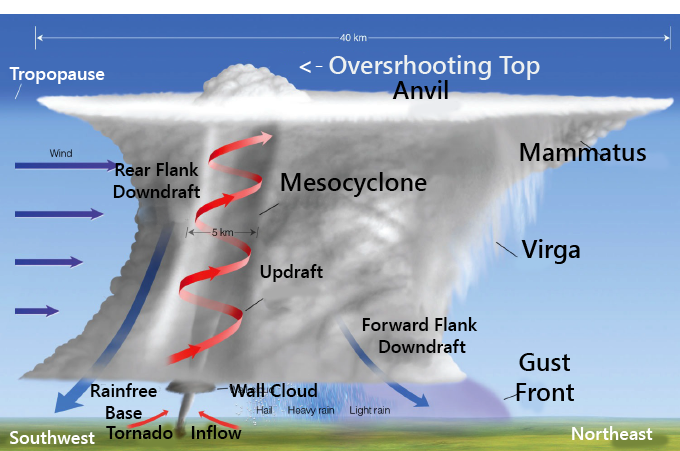
<style>
.page{position:relative;width:680px;height:451px}
.page>*{position:absolute;margin:0}
.t1{font:25px "SegoeUI-Semibold";color:#ffffff}
.t2{font:18px "SegoeUI-Semibold";color:#ffffff}
.t3{font:25px "SegoeUI-Semibold";color:#000000}
.t4{font:18px "SegoeUI-Semibold";color:#000000}
</style>
<div class="page">
<p class="t1" style="left:299px;top:61px;width:24px;height:12px">&lt;-</p>
<p class="t2" style="left:9px;top:67px;width:96px;height:17px">Tropopause</p>
<p class="t3" style="left:392px;top:80px;width:56px;height:19px">Anvil</p>
<p class="t3" style="left:520px;top:143px;width:126px;height:18px">Mammatus</p>
<p class="t4" style="left:113px;top:162px;width:87px;height:36px;text-align:center">Rear Flank<br>Downdraft</p>
<p class="t3" style="left:281px;top:172px;width:146px;height:25px">Mesocyclone</p>
<p class="t4" style="left:260px;top:264px;width:63px;height:18px">Updraft</p>
<p class="t4" style="left:362px;top:317px;width:116px;height:36px;text-align:center">Forward Flank <br>Downdraft</p>
<p class="t3" style="left:516px;top:353px;width:58px;height:48px;text-align:center">Gust<br>Front</p>
<p class="t4" style="left:91px;top:383px;width:66px;height:36px;text-align:center">Rainfree<br>Base</p>
<p class="t4" style="left:229px;top:383px;width:88px;height:14px">Wall Cloud</p>
<p class="t4" style="left:106px;top:425px;width:67px;height:14px">Tornado</p>
<p class="t4" style="left:191px;top:425px;width:51px;height:14px">Inflow</p>
<p class="t2" style="left:10px;top:430px;width:85px;height:14px">Southwest</p>
<p class="t2" style="left:572px;top:426px;width:81px;height:14px">Northeast</p>
</div>
